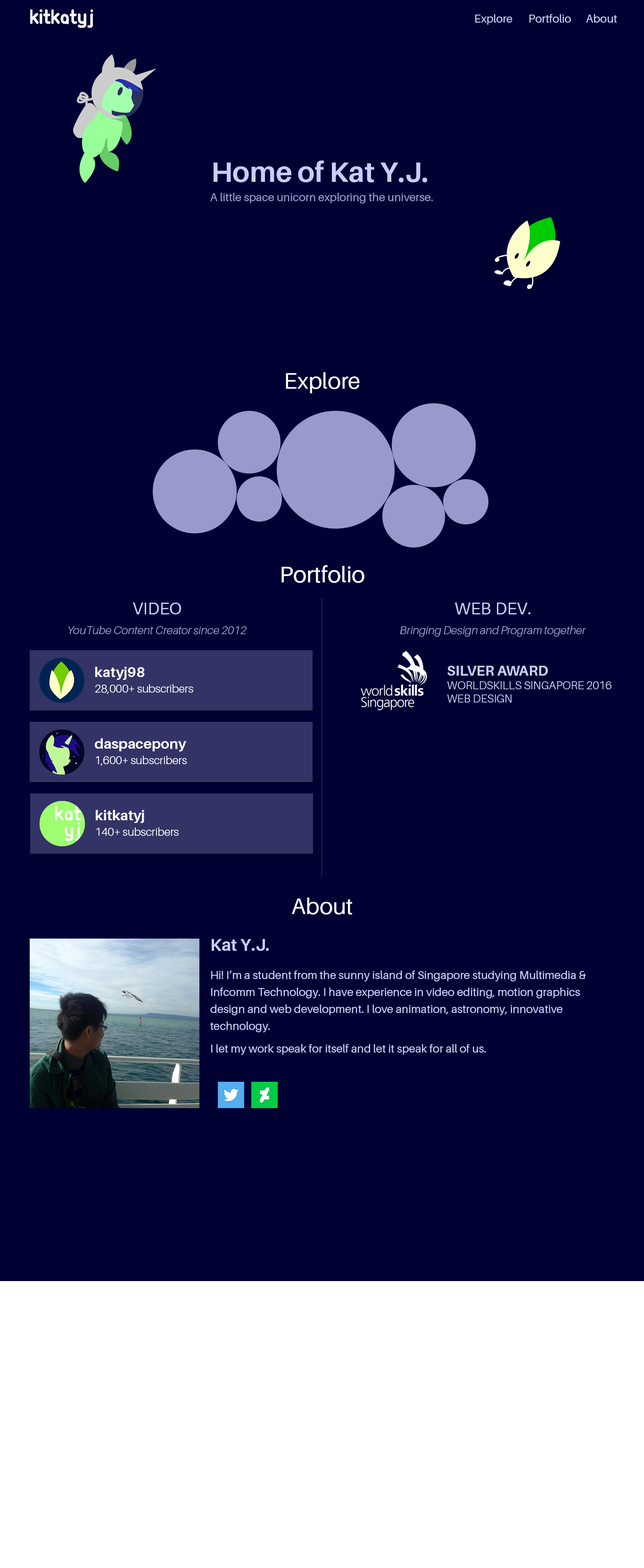
<style>
.page{position:relative;width:644px;height:1568px;background:#000033}
.page>*{position:absolute;margin:0}
.t1{font:11.3px "Aileron-Regular";color:#ccccff}
.t2{font:28.3px "Aileron-Bold";color:#ccccff}
.t3{font:11.3px "Aileron-Regular";color:#9999cc}
.t4{font:22.6px "Aileron-Regular";color:#ffffff}
.t5{font:17px "Aileron-Regular";color:#ccccff}
.t6{font:11.3px "Aileron-LightItalic";color:#9999cc}
.t7{font:11.3px "Aileron-Light";color:#ccccff}
.t8{font:14.1px "Aileron-Bold";color:#ccccff}
.t9{font:14.1px "Aileron-Bold";color:#ffffff}
.t10{font:11.3px "Aileron-Light";color:#ffffff}
.t11{font:11.3px/17px "Aileron-Regular";color:#ccccff}
.t12{font:17px/17px "Aileron-Bold";color:#ccccff}
.t13{font:11.3px/11.3px "Aileron-Regular";color:#ccccff}
</style>
<div class="page">
<p class="t1" style="left:475px;top:14px;width:37px;height:11px">Explore</p>
<p class="t1" style="left:529px;top:14px;width:42px;height:9px">Portfolio</p>
<p class="t1" style="left:586px;top:14px;width:31px;height:9px">About</p>
<p class="t2" style="left:213px;top:160px;width:214px;height:22px">Home of Kat Y.J.</p>
<p class="t3" style="left:210px;top:193px;width:223px;height:11px">A little space unicorn exploring the universe.</p>
<p class="t4" style="left:286px;top:372px;width:73px;height:21px">Explore</p>
<p class="t4" style="left:281px;top:565px;width:83px;height:18px">Portfolio</p>
<p class="t4" style="left:281px;top:565px;width:83px;height:18px">Portfolio</p>
<p class="t5" style="left:133px;top:603px;width:48px;height:11px">VIDEO</p>
<p class="t5" style="left:455px;top:603px;width:75px;height:11px">WEB DEV.</p>
<p class="t6" style="left:68px;top:626px;width:178px;height:9px">YouTube Content Creator since 2012</p>
<p class="t6" style="left:400px;top:626px;width:186px;height:11px">Bringing Design and Program together</p>
<p class="t7" style="left:447px;top:666px;width:164px;height:36px"><span class="t8">SILVER AWARD<br></span>WORLDSKILLS SINGAPORE 2016<br>WEB DESIGN</p>
<p class="t9" style="left:95px;top:667px;width:50px;height:13px">katyj98</p>
<p class="t10" style="left:95px;top:684px;width:98px;height:10px">28,000+ subscribers</p>
<p class="t9" style="left:95px;top:738px;width:91px;height:13px">daspacepony</p>
<p class="t10" style="left:96px;top:756px;width:91px;height:10px">1,600+ subscribers</p>
<p class="t9" style="left:96px;top:810px;width:48px;height:13px">kitkatyj</p>
<p class="t10" style="left:96px;top:827px;width:83px;height:9px">140+ subscribers</p>
<p class="t4" style="left:292px;top:898px;width:60px;height:17px">About</p>
<p class="t11" style="left:210px;top:939px;width:376px;height:116px"><span class="t12">Kat Y.J.<br></span><span class="t13"><br>Hi! I</span>’m a student from the sunny island of Singapore studying Multimedia &amp; Infcomm Technology. I have experience in video editing, motion graphics design and web development. I love animation, astronomy, innovative technology.<span class="t13"><br><br>I let my work speak for itself and let it speak for all of us.</span></p>
</div>
